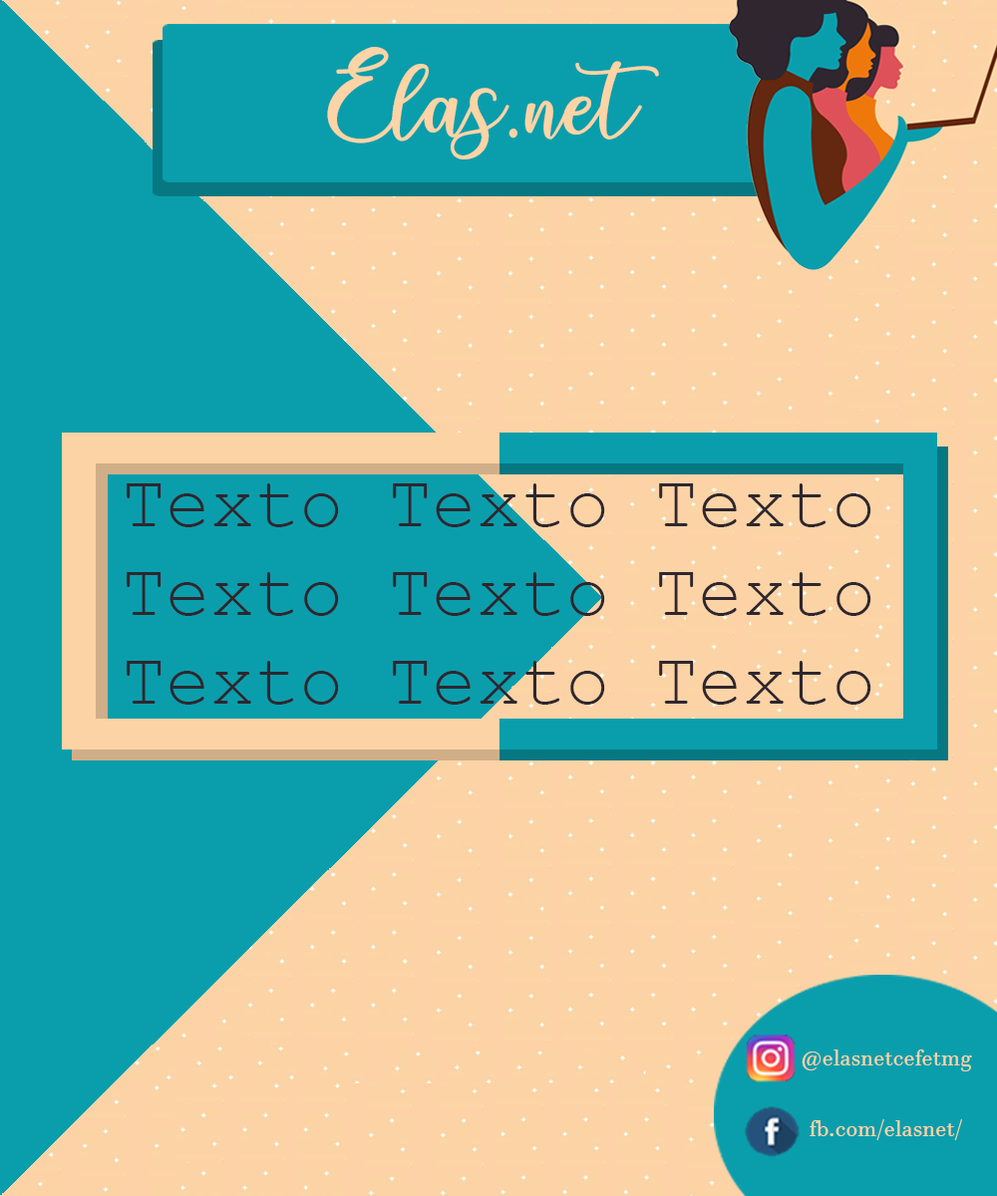
<style>
.page{position:relative;width:997px;height:1196px;background:#0a9eac}
.page>*{position:absolute;margin:0}
.t1{font:89.1px "charlinda-Regular";color:#fcd4a5}
.t2{font:73.9px "CourierNewPSMT";color:#2e272f}
.t3{font:23.3px "JavaneseText";color:#fdd3a6}
</style>
<div class="page">
<p class="t1" style="left:327px;top:47px;width:332px;height:112px">Elas.net</p>
<p class="t2" style="left:127px;top:483px;width:744px;height:222px;text-align:center">Texto Texto Texto<br>Texto Texto Texto<br>Texto Texto Texto</p>
<p class="t3" style="left:801px;top:1050px;width:171px;height:22px">@elasnetcefetmg</p>
<p class="t3" style="left:809px;top:1119px;width:153px;height:21px">fb.com/elasnet/</p>
</div>
